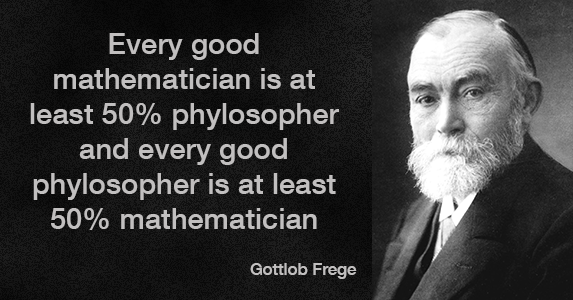
<style>
.page{position:relative;width:573px;height:300px}
.page>*{position:absolute;margin:0}
.t1{font:29.2px "HelveticaNeue-Medium";color:#c1bfbf}
.t2{font:16.7px "HelveticaNeue-Medium";color:#c1bfbf}
</style>
<div class="page">
<p class="t1" style="left:30px;top:33px;width:309px;height:197px;text-align:center">Every good mathematician is at least 50% phylosopher and every good phylosopher is at least 50% mathematician</p>
<p class="t2" style="left:250px;top:263px;width:107px;height:16px">Gottlob Frege</p>
</div>
